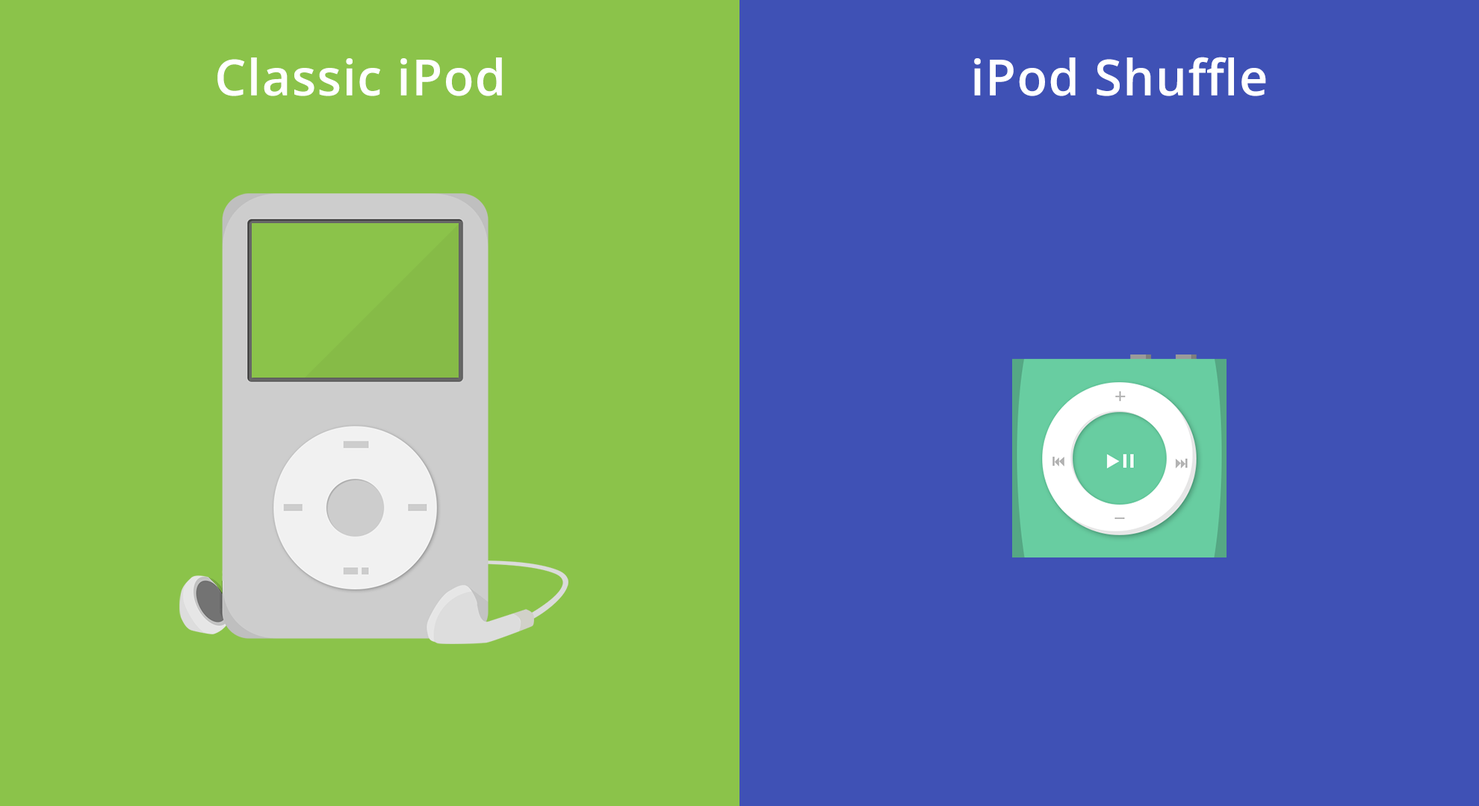
<style>
.page{position:relative;width:1479px;height:806px;background:#3f51b5}
.page>*{position:absolute;margin:0}
.t1{font:49.8px "OpenSans-Semibold";letter-spacing:0.02em;color:#ffffff}
</style>
<div class="page">
<p class="t1" style="left:217px;top:57px;width:285px;height:39px">Classic iPod</p>
<p class="t1" style="left:974px;top:57px;width:292px;height:39px">iPod Shuffle</p>
</div>
